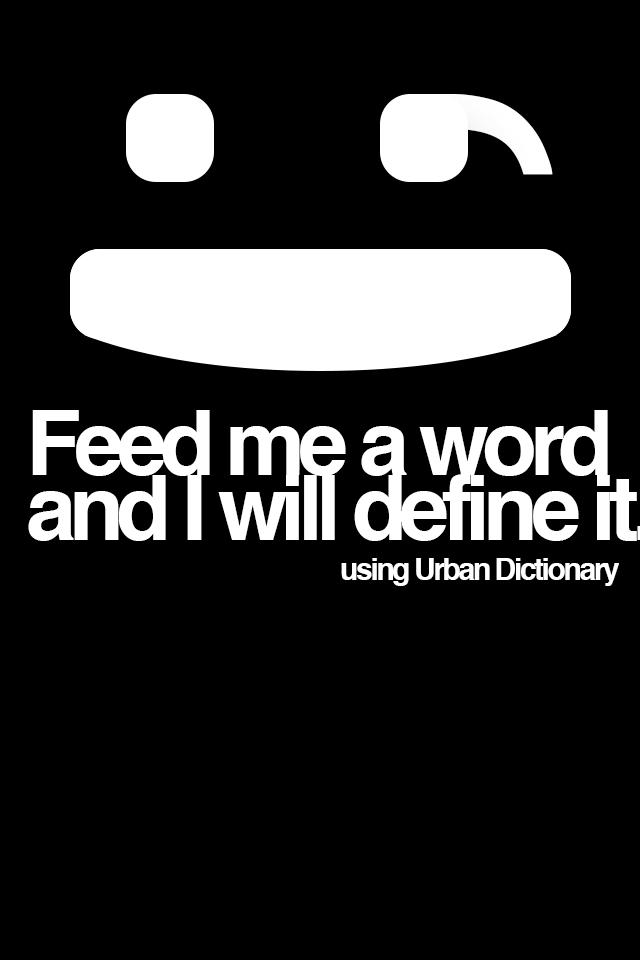
<style>
.page{position:relative;width:640px;height:960px;background:#000000}
.page>*{position:absolute;margin:0}
.t1{font:534.7px "Helvetica-Bold";letter-spacing:-0.08em;color:#ffffff}
.t2{font:90px "Helvetica-Bold";letter-spacing:-0.08em;color:#ffffff}
.t3{font:30px "Helvetica-Bold";letter-spacing:-0.08em;color:#ffffff}
</style>
<div class="page">
<p class="t1" style="left:384px;top:94px;width:169px;height:81px;rotate:-90deg">,</p>
<p class="t2" style="left:32px;top:410px;width:576px;height:66px">Feed me a word</p>
<p class="t3" style="left:341px;top:558px;width:278px;height:28px">using Urban Dictionary</p>
</div>
